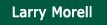
<style>
.page{position:relative;width:107px;height:25px;background:#005941}
.page>*{position:absolute;margin:0}
.t1{font:14px "Tahoma";letter-spacing:0.02em;color:#ffffff;font-weight:bold}
</style>
<div class="page">
<p class="t1" style="left:12px;top:6px;width:80px;height:15px">Larry Morell</p>
</div>
